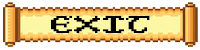
<style>
.page{position:relative;width:200px;height:50px;background:#ffffff}
.page>*{position:absolute;margin:0}
.t1{font:30px "Medieval-Pixel";color:#000000;scale:1.39 1}
</style>
<div class="page">
<p class="t1" style="left:51px;top:16px;width:99px;height:17px">EXIT</p>
</div>
